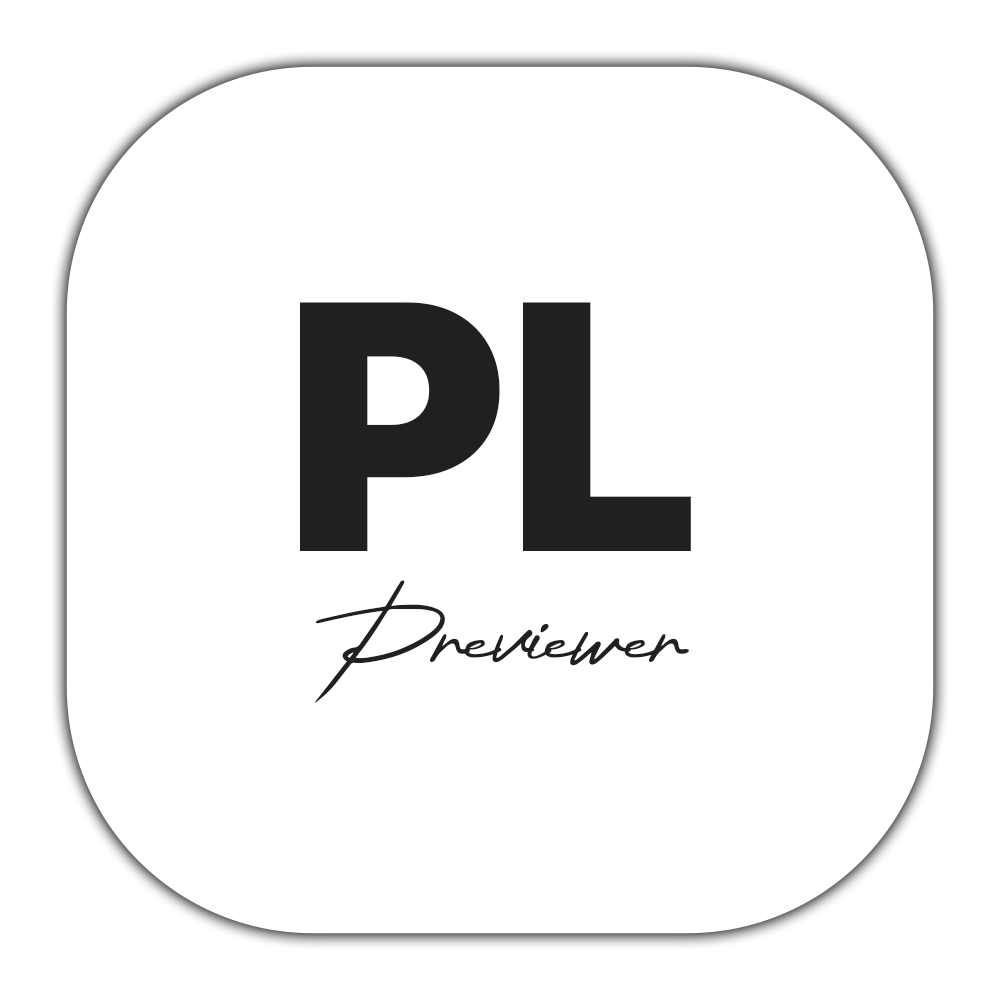
<style>
.page{position:relative;width:1000px;height:1000px;background:#ffffff}
.page>*{position:absolute;margin:0}
.t1{font:341.7px "InterTight-Black";letter-spacing:0.02em;color:#202020}
.t2{font:150px "Thesignature";letter-spacing:-0.02em;color:#202020}
</style>
<div class="page">
<p class="t1" style="left:300px;top:302px;width:391px;height:249px">PL</p>
<p class="t2" style="left:314px;top:580px;width:375px;height:123px">Previewer</p>
</div>
